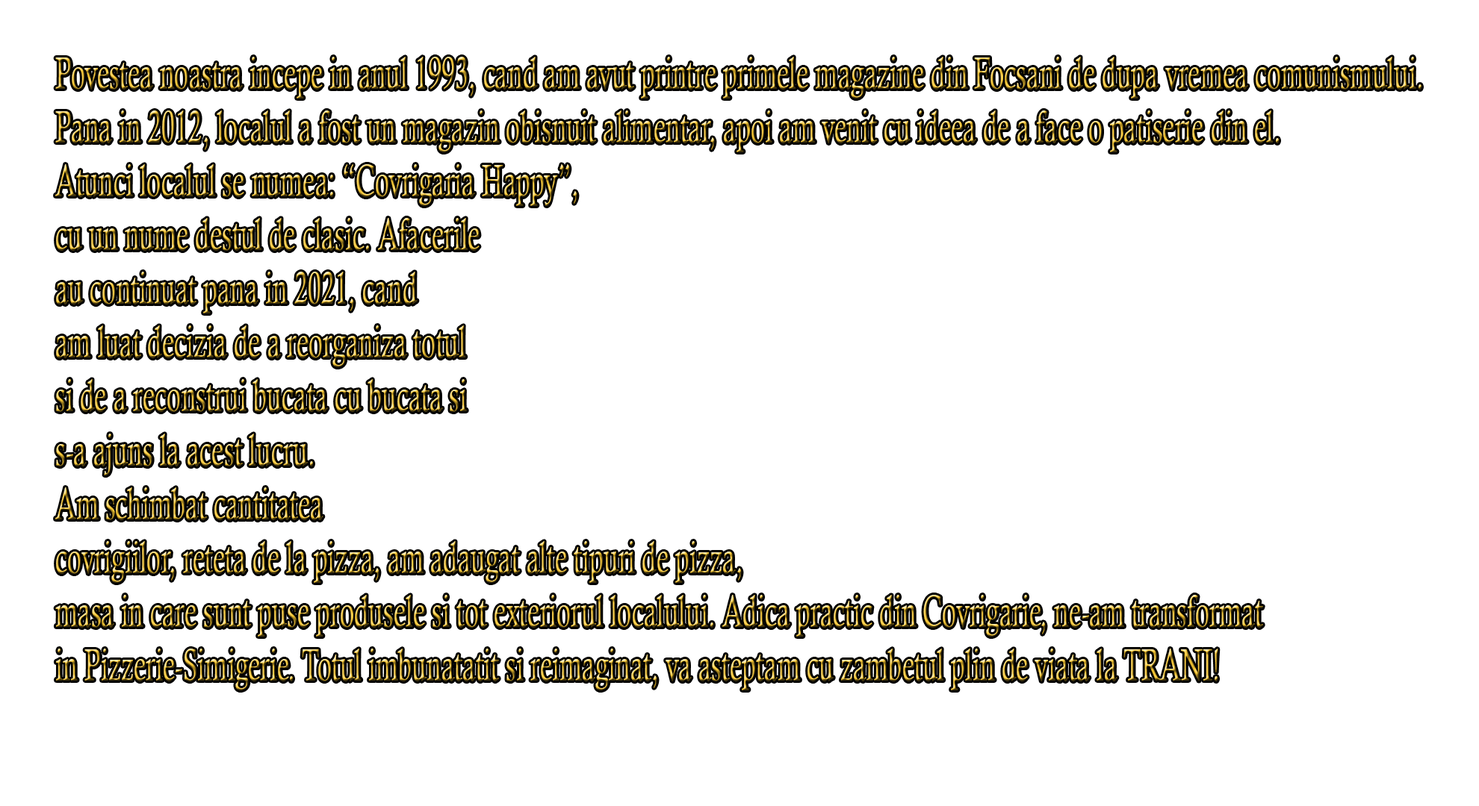
<style>
.page{position:relative;width:1479px;height:806px;background:#ffffff}
.page>*{position:absolute;margin:0}
.t1{font:44.9px "CalistoMT";scale:0.59 1}
</style>
<div class="page">
<p class="t1" style="left:55px;top:57px;width:1366px;height:634px">Povestea noastra incepe in anul 1993, cand am avut printre primele magazine din Focsani de dupa vremea comunismului. <br>Pana in 2012, localul a fost un magazin obisnuit alimentar, apoi am venit cu ideea de a face o patiserie din el.<br>Atunci localul se numea: “Covrigaria Happy”, <br>cu un nume destul de clasic. Afacerile<br>au continuat pana in 2021, cand <br>am luat decizia de a reorganiza totul <br>si de a reconstrui bucata cu bucata si<br>s-a ajuns la acest lucru. <br>Am schimbat cantitatea <br>covrigiilor, reteta de la pizza, am adaugat alte tipuri de pizza, <br>masa in care sunt puse produsele si tot exteriorul localului. Adica practic din Covrigarie, ne-am transformat <br>in Pizzerie-Simigerie. Totul imbunatatit si reimaginat, va asteptam cu zambetul plin de viata la TRANI!</p>
</div>
